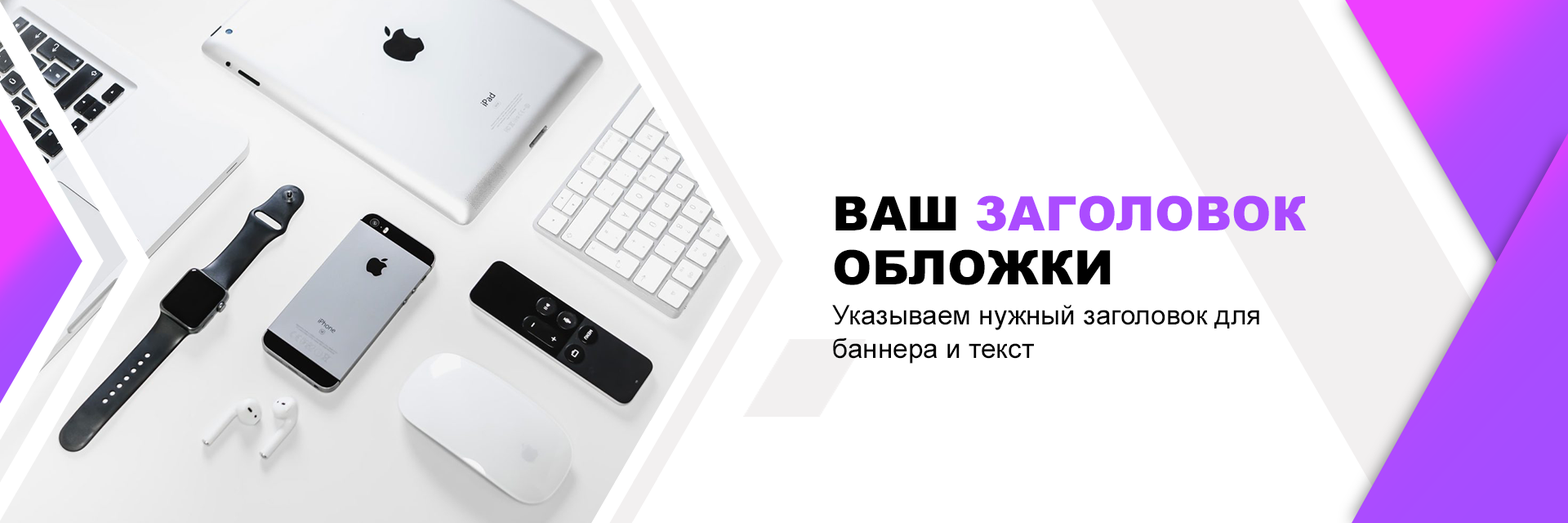
<style>
.page{position:relative;width:1568px;height:523px;background:#ffffff}
.page>*{position:absolute;margin:0}
.t1{font:47.6px/54.4px "Arial-Black";color:#ab4cff}
.t2{font:47.6px/54.4px "Arial-Black";color:#000000}
.t3{font:27.2px/34px "ArialMT";color:#000000}
</style>
<div class="page">
<p class="t1" style="left:834px;top:195px;width:473px;height:90px"><span class="t2">ВАШ </span>ЗАГОЛОВОК<span class="t2"> ОБЛОЖКИ</span></p>
<p class="t3" style="left:832px;top:305px;width:427px;height:58px">Указываем нужный заголовок для баннера и текст</p>
</div>
